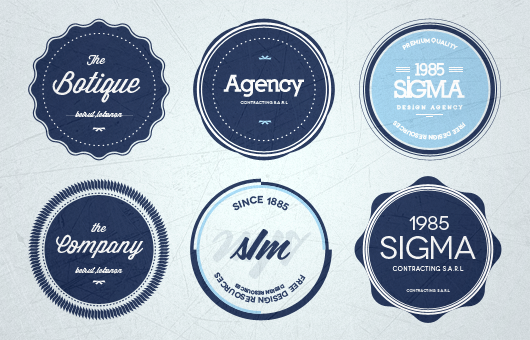
<style>
.page{position:relative;width:530px;height:340px}
.page>*{position:absolute;margin:0}
.t1{font:6px "Novecentowide-DemiBold";letter-spacing:-0.02em;color:#ffffff}
.t2{font:28.9px/28.9px "WisdomScriptAI";color:#f5f5f5}
.t3{font:12.2px/28.9px "WisdomScriptAI";color:#f5f5f5}
.t4{font:16.7px "Nilland-Black";letter-spacing:-0.04em;color:#ffffff}
.t5{font:23.1px "Nilland-Black";letter-spacing:-0.04em;color:#f5f5f5}
.t6{font:24px "Nilland-Black";letter-spacing:-0.1em;color:#ffffff}
.t7{font:4px "Novecentowide-Book";letter-spacing:0.06em}
.t8{font:8.1px "WisdomScriptAI";color:#f5f5f5}
.t9{font:5px "Nilland-Black";letter-spacing:0.4em;color:#ffffff}
.t10{font:10px "Novecentowide-DemiBold";letter-spacing:-0.02em;color:#2f3f63}
.t11{font:18.9px "Novecentowide-Normal";letter-spacing:-0.02em;color:#f5f5f5}
.t12{font:24px/20.9px "WisdomScriptAI";color:#f5f5f5}
.t13{font:12.2px/20.9px "WisdomScriptAI";color:#f5f5f5}
.t14{font:69.4px "CoffeeService"}
.t15{font:43.5px "CoffeeService";color:#2f3f63}
.t16{font:31.7px "Novecentowide-Normal";letter-spacing:-0.02em;color:#f5f5f5}
.t17{font:5.9px "Novecentowide-Book";letter-spacing:0.06em;color:#f5f5f5}
.t18{font:8px "Novecentowide-DemiBold";letter-spacing:-0.02em;color:#2f3f63}
.t19{font:5px "Novecentowide-DemiBold";letter-spacing:-0.02em;color:#2f3f63}
.t20{font:3.7px "Novecentowide-Book";letter-spacing:0.06em}
</style>
<div class="page">
<p class="t1" style="left:402px;top:37px;width:56px;height:13px;text-align:center">premium quality</p>
<p class="t2" style="left:52px;top:55px;width:89px;height:48px;text-align:center"><span class="t3">The<br></span>Botique</p>
<p class="t4" style="left:415px;top:62px;width:30px;height:14px">1985</p>
<p class="t5" style="left:223px;top:74px;width:81px;height:23px">Agency</p>
<p class="t6" style="left:394px;top:76px;width:71px;height:22px">SIGMA</p>
<p class="t7" style="left:240px;top:101px;width:48px;height:3px">contracting s.a.r.l</p>
<p class="t8" style="left:75px;top:111px;width:48px;height:7px">beirut, lebanon</p>
<p class="t9" style="left:396px;top:104px;width:67px;height:6px">DESIGN AGENCY</p>
<p class="t1" style="left:393px;top:120px;width:73px;height:20px;text-align:center">free design resources</p>
<p class="t10" style="left:232px;top:195px;width:58px;height:16px">SINCE 1885</p>
<p class="t11" style="left:409px;top:216px;width:40px;height:14px">1985</p>
<p class="t12" style="left:56px;top:223px;width:88px;height:37px;text-align:center"><span class="t13">the<br></span>Company</p>
<p class="t14" style="left:212px;top:230px;width:100px;height:49px;rotate:180deg">sIm</p>
<p class="t15" style="left:229px;top:229px;width:62px;height:31px">sIm</p>
<p class="t16" style="left:380px;top:236px;width:96px;height:23px">SIGma</p>
<p class="t8" style="left:75px;top:267px;width:48px;height:7px">beirut, lebanon</p>
<p class="t17" style="left:392px;top:266px;width:72px;height:5px">contracting s.a.r.l</p>
<p class="t18" style="left:214px;top:272px;width:92px;height:32px;text-align:center">free design resources</p>
<p class="t19" style="left:234px;top:283px;width:51px;height:12px;text-align:center">design resources</p>
<p class="t20" style="left:406px;top:289px;width:44px;height:3px">contracting s.a.r.l</p>
</div>
